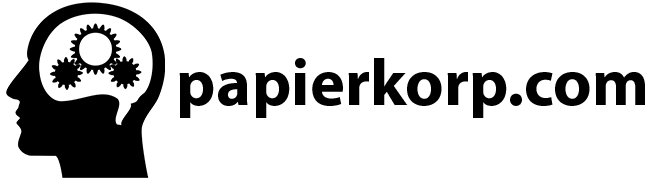
<style>
.page{position:relative;width:663px;height:180px;background:#ffffff}
.page>*{position:absolute;margin:0}
.t1{font:66.7px "MyriadPro-Bold";color:#000000}
</style>
<div class="page">
<p class="t1" style="left:179px;top:58px;width:466px;height:60px">papierkorp.com</p>
</div>
